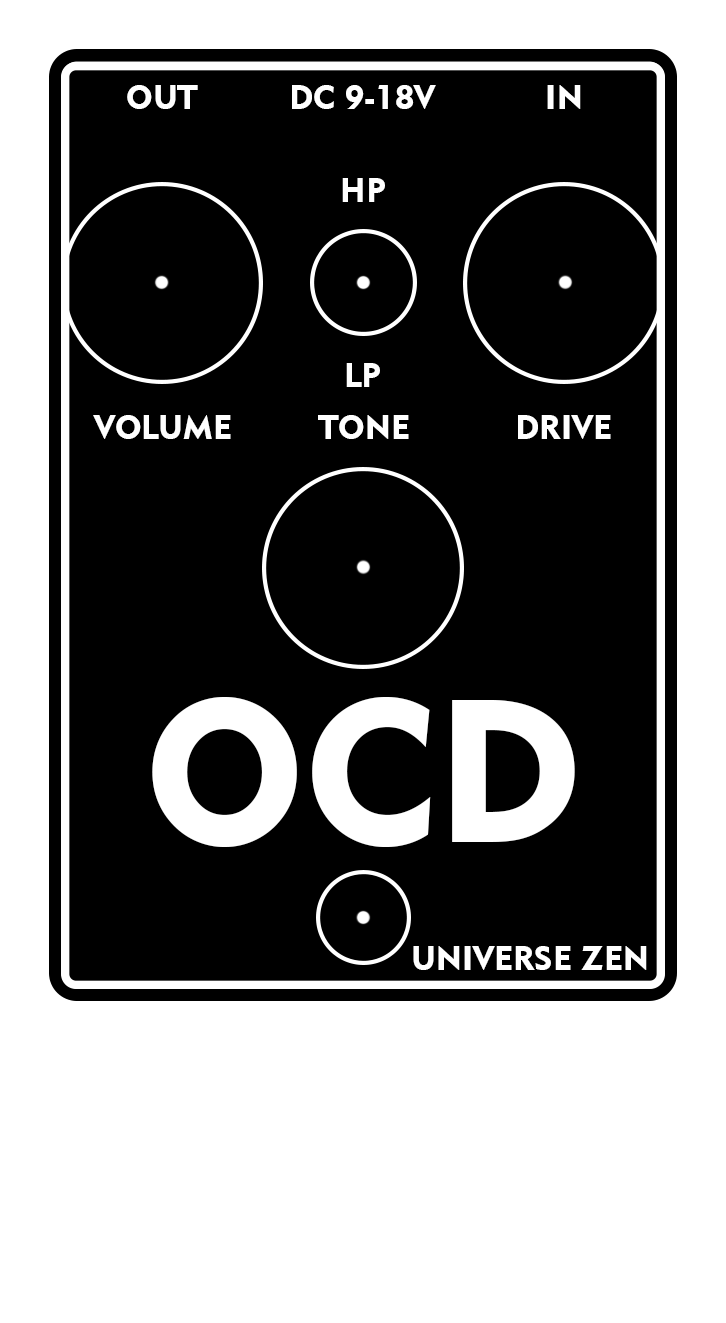
<style>
.page{position:relative;width:726px;height:1323px;background:#000000}
.page>*{position:absolute;margin:0}
.t1{font:33.3px "Geometric415BT-BlackA";color:#ffffff}
.t2{font:200px "Geometric415BT-BlackA";color:#ffffff}
</style>
<div class="page">
<p class="t1" style="left:127px;top:85px;width:71px;height:24px">OUT</p>
<p class="t1" style="left:292px;top:85px;width:144px;height:24px">DC 9-18V</p>
<p class="t1" style="left:547px;top:85px;width:34px;height:24px">IN</p>
<p class="t1" style="left:342px;top:178px;width:43px;height:24px">HP</p>
<p class="t1" style="left:346px;top:363px;width:34px;height:24px">LP</p>
<p class="t1" style="left:93px;top:415px;width:138px;height:24px">VOLUME</p>
<p class="t1" style="left:318px;top:415px;width:91px;height:24px">TONE</p>
<p class="t1" style="left:518px;top:415px;width:93px;height:24px">DRIVE</p>
<p class="t2" style="left:152px;top:697px;width:423px;height:150px">OCD</p>
<p class="t1" style="left:413px;top:946px;width:234px;height:24px">UNIVERSE ZEN</p>
</div>
